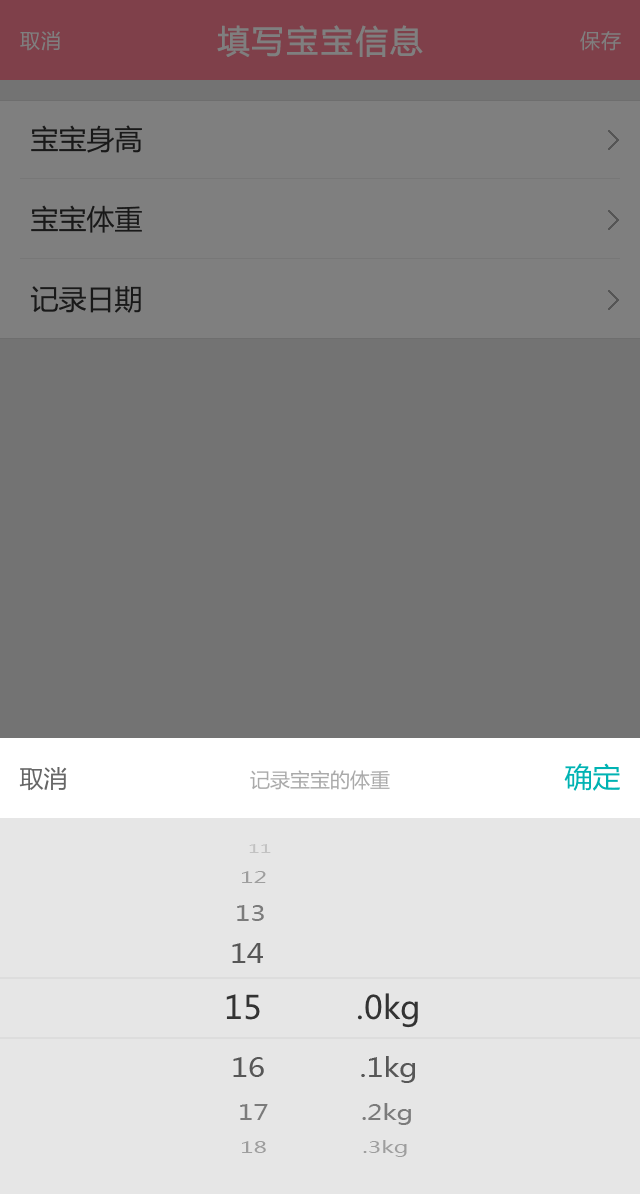
<style>
.page{position:relative;width:640px;height:1194px;background:#737373}
.page>*{position:absolute;margin:0}
.t1{font:32px "MicrosoftYaHei";letter-spacing:0.05em;color:#7f7f7f;font-weight:bold}
.t2{font:20px "MicrosoftYaHei";letter-spacing:0.05em;color:#7f7f7f}
.t3{font:28px/40px "MicrosoftYaHei";color:#191919}
.t4{font:24px "MicrosoftYaHei";color:#666666}
.t5{font:20px "MicrosoftYaHei";color:#aaaaaa}
.t6{font:28px "MicrosoftYaHei";color:#00b3b3}
.t7{font:12px "MicrosoftYaHei";color:#c2c2c2;scale:1.67 1}
.t8{font:16.1px "MicrosoftYaHei";color:#9e9e9e;scale:1.43 1}
.t9{font:20.8px "MicrosoftYaHei";color:#7b7b7b;scale:1.25 1}
.t10{font:26.1px "MicrosoftYaHei";color:#575757;scale:1.11 1}
.t11{font:32px "MicrosoftYaHei";color:#333333}
</style>
<div class="page">
<p class="t1" style="left:217px;top:25px;width:206px;height:32px">填写宝宝信息</p>
<p class="t2" style="left:20px;top:31px;width:40px;height:20px">取消</p>
<p class="t2" style="left:580px;top:31px;width:41px;height:20px">保存</p>
<p class="t3" style="left:30px;top:125px;width:112px;height:188px">宝宝身高<br><br>宝宝体重<br><br>记录日期</p>
<p class="t4" style="left:19px;top:767px;width:48px;height:24px">取消</p>
<p class="t5" style="left:250px;top:770px;width:140px;height:20px">记录宝宝的体重</p>
<p class="t6" style="left:564px;top:763px;width:56px;height:28px">确定</p>
<p class="t7" style="left:249px;top:844px;width:22px;height:9px">11</p>
<p class="t8" style="left:242px;top:871px;width:24px;height:12px">12</p>
<p class="t9" style="left:237px;top:905px;width:27px;height:16px">13</p>
<p class="t10" style="left:232px;top:943px;width:31px;height:20px">14</p>
<p class="t11" style="left:226px;top:993px;width:192px;height:35px">15          .0kg</p>
<p class="t10" style="left:233px;top:1056px;width:182px;height:27px">16           .1kg</p>
<p class="t9" style="left:240px;top:1103px;width:171px;height:22px">17            .2kg</p>
<p class="t8" style="left:242px;top:1140px;width:165px;height:17px">18              .3kg</p>
</div>
